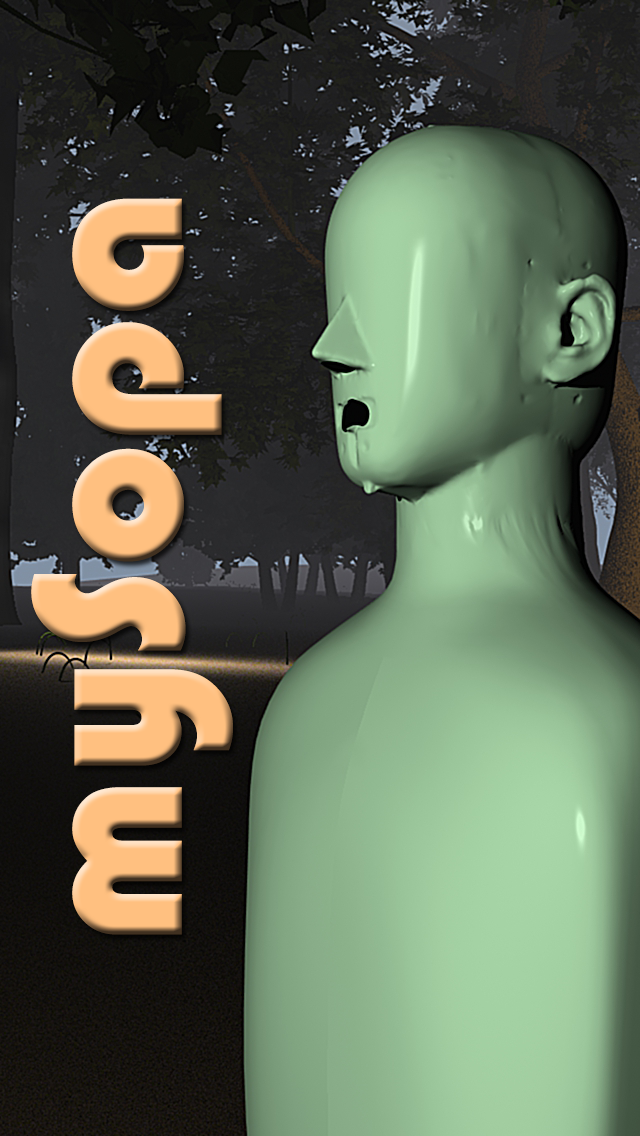
<style>
.page{position:relative;width:640px;height:1136px}
.page>*{position:absolute;margin:0}
.t1{font:220px "Bauhaus93";color:#ffc080}
</style>
<div class="page">
<p class="t1" style="left:31px;top:198px;width:202px;height:737px;rotate:-90deg">mySopa</p>
</div>
